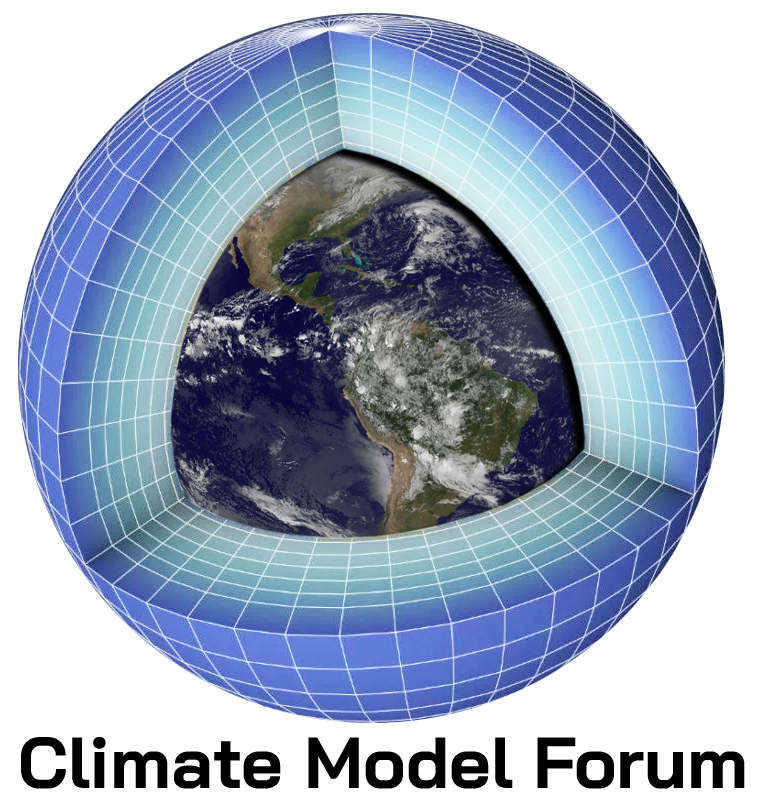
<style>
.page{position:relative;width:778px;height:810px;background:#ffffff}
.page>*{position:absolute;margin:0}
.t1{font:72px "BaiJamjuree-Bold";color:#000000}
</style>
<div class="page">
<p class="t1" style="left:21px;top:737px;width:724px;height:52px">Climate Model Forum</p>
</div>
